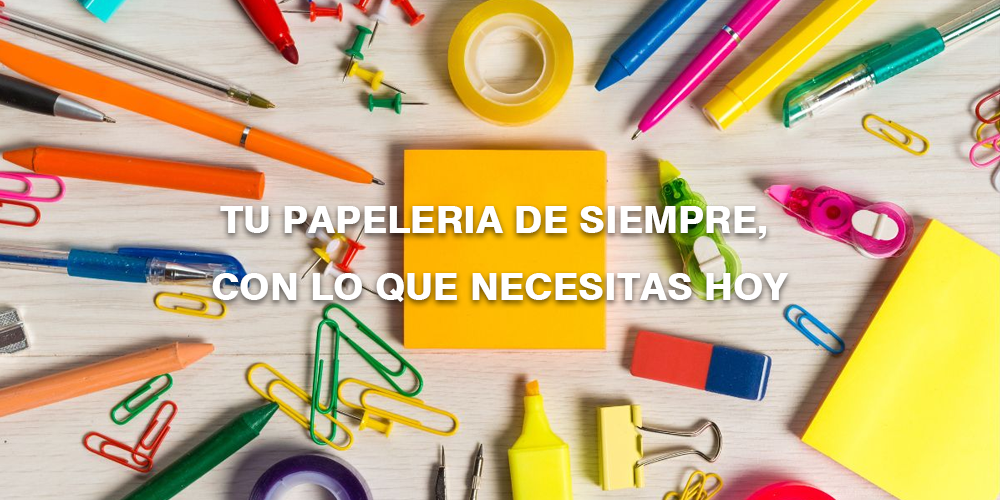
<style>
.page{position:relative;width:1000px;height:500px}
.page>*{position:absolute;margin:0}
.t1{font:9.1px "Swiss721BT-Heavy";color:#ffffff}
</style>
<div class="page">
<p class="t1" style="left:212px;top:206px;width:577px;height:96px;text-align:center">TU PAPELERIA DE SIEMPRE, <br>CON LO QUE NECESITAS HOY</p>
</div>
